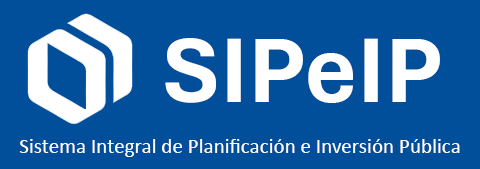
<style>
.page{position:relative;width:480px;height:169px;background:#014f9a}
.page>*{position:absolute;margin:0}
.t1{font:96.3px "Aptos-Bold";color:#ffffff}
.t2{font:21.2px "Calibri";color:#ffffff}
</style>
<div class="page">
<p class="t1" style="left:165px;top:38px;width:275px;height:65px">SIPeIP</p>
<p class="t2" style="left:19px;top:139px;width:441px;height:18px">Sistema Integral de Planificación e Inversión Pública</p>
</div>
